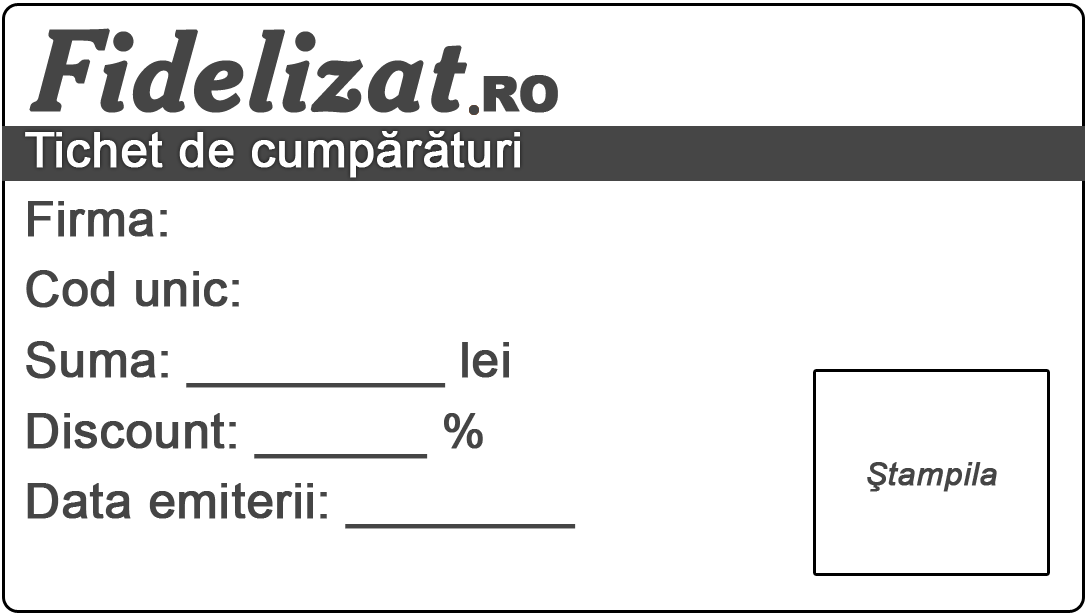
<style>
.page{position:relative;width:1087px;height:614px;background:#ffffff}
.page>*{position:absolute;margin:0}
.t1{font:108px "CheltenhamBT-BoldItalicHeadline";color:#454545;font-weight:bold}
.t2{font:49px "Arial-Black";color:#454545;font-weight:bold}
.t3{font:49px "ArialMT";color:#ffffff;font-weight:bold}
.t4{font:49px/70.7px "ArialMT";color:#454545;font-weight:bold}
.t5{font:32.3px "Arial-ItalicMT";color:#454545;font-weight:bold}
</style>
<div class="page">
<p class="t1" style="left:29px;top:28px;width:438px;height:85px">Fidelizat</p>
<p class="t2" style="left:483px;top:75px;width:75px;height:38px">RO</p>
<p class="t3" style="left:25px;top:131px;width:495px;height:47px">Tichet de cumpărături</p>
<p class="t4" style="left:26px;top:201px;width:550px;height:328px">Firma:<br>Cod unic: <br>Suma: _________ lei<br>Discount: ______ %<br>Data emiterii: ________</p>
<p class="t5" style="left:867px;top:462px;width:130px;height:30px">Ştampila</p>
</div>
